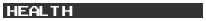
<style>
.page{position:relative;width:206px;height:21px;background:#333333}
.page>*{position:absolute;margin:0}
.t1{font:20px "ArcadeClassic";color:#ffffff}
</style>
<div class="page">
<p class="t1" style="left:7px;top:6px;width:66px;height:10px">health</p>
</div>
